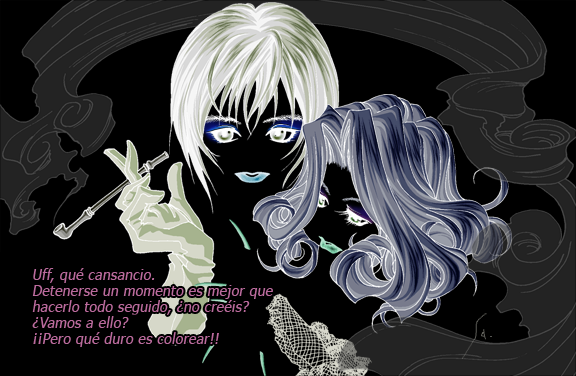
<style>
.page{position:relative;width:576px;height:376px;background:#000000}
.page>*{position:absolute;margin:0}
.t1{font:15px/16px "Tahoma";letter-spacing:0.04em;color:#bb6b9d;font-style:italic;scale:0.9 1}
</style>
<div class="page">
<p class="t1" style="left:32px;top:268px;width:241px;height:79px">Uff, qué cansancio.<br>Detenerse un momento es mejor que<br>hacerlo todo seguido, ¿no creéis?<br>¿Vamos a ello?<br>¡¡Pero qué duro es colorear!!</p>
</div>
